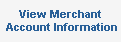
<style>
.page{position:relative;width:121px;height:42px;background:#f5f5f5}
.page>*{position:absolute;margin:0}
.t1{font:11px "Arial-BoldMT";color:#296098}
</style>
<div class="page">
<p class="t1" style="left:6px;top:10px;width:111px;height:21px;text-align:center">View Merchant <br>Account Information</p>
</div>
